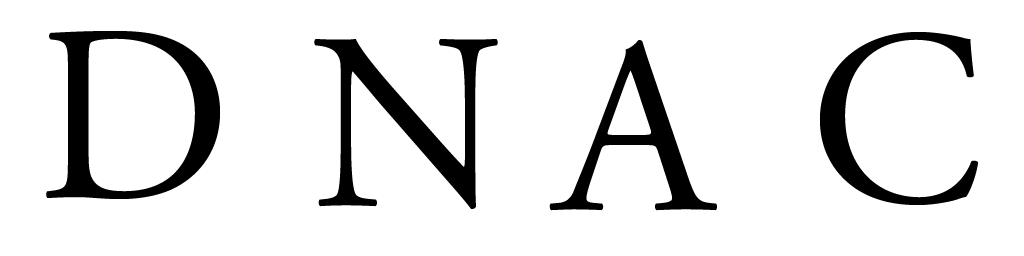
<style>
.page{position:relative;width:1024px;height:256px;background:#ffffff}
.page>*{position:absolute;margin:0}
.t1{font:250px "AGaramondPro-Regular";color:#000000}
</style>
<div class="page">
<p class="t1" style="left:46px;top:31px;width:174px;height:168px">D</p>
<p class="t1" style="left:314px;top:39px;width:184px;height:170px">N</p>
<p class="t1" style="left:549px;top:40px;width:168px;height:171px">A</p>
<p class="t1" style="left:820px;top:32px;width:158px;height:173px">C</p>
</div>
